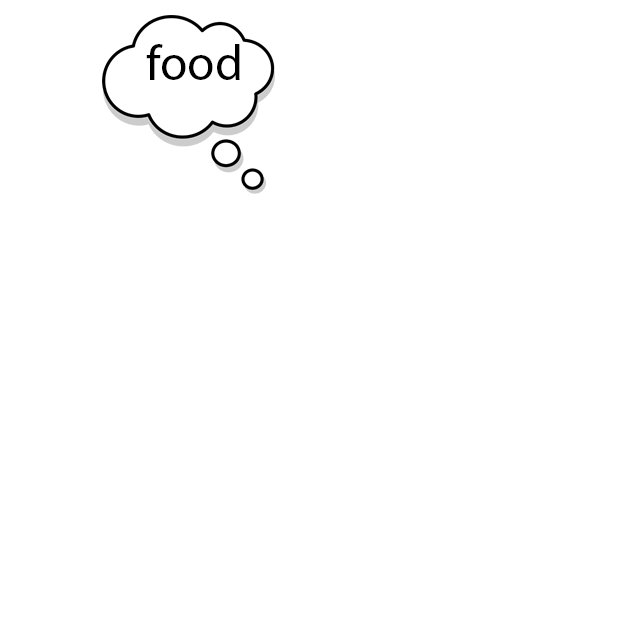
<style>
.page{position:relative;width:626px;height:626px;background:#ffffff}
.page>*{position:absolute;margin:0}
.t1{font:50px "MyriadPro-Regular";color:#000000}
</style>
<div class="page">
<p class="t1" style="left:146px;top:44px;width:94px;height:36px">food</p>
</div>
